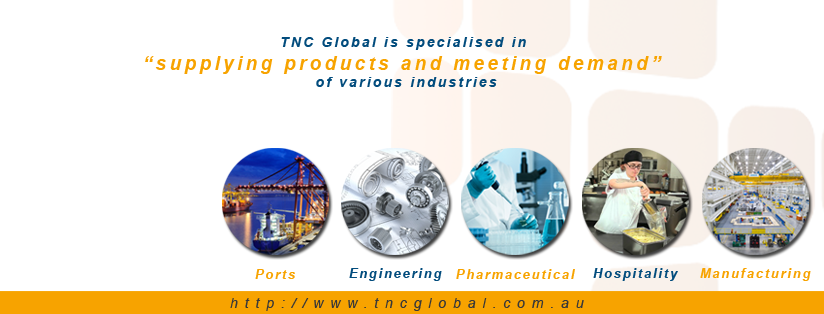
<style>
.page{position:relative;width:824px;height:314px;background:#ffffff}
.page>*{position:absolute;margin:0}
.t1{font:19.4px "Arial-BoldItalicMT";letter-spacing:0.16em;color:#f7a300}
.t2{font:13.9px "Arial-BoldItalicMT";letter-spacing:0.16em;color:#024c7d}
.t3{font:12.5px "Arial-BoldItalicMT";letter-spacing:0.16em;color:#f7a300}
.t4{font:12.5px "Arial-BoldItalicMT";letter-spacing:0.16em;color:#024c7d}
.t5{font:13.9px "Arial-ItalicMT";letter-spacing:0.5em;color:#383839}
</style>
<div class="page">
<p class="t1" style="left:145px;top:37px;width:517px;height:50px;text-align:center"><span class="t2">TNC Global is specialised in <br></span>“supplying products and meeting demand” <br><span class="t2">of various industries</span></p>
<p class="t3" style="left:255px;top:269px;width:40px;height:10px">Ports</p>
<p class="t4" style="left:349px;top:268px;width:93px;height:13px">Engineering</p>
<p class="t3" style="left:456px;top:269px;width:119px;height:10px">Pharmaceutical</p>
<p class="t4" style="left:593px;top:268px;width:85px;height:13px">Hospitality</p>
<p class="t3" style="left:700px;top:268px;width:111px;height:13px">Manufacturing</p>
<p class="t5" style="left:230px;top:298px;width:354px;height:13px">http://www.tncglobal.com.au</p>
</div>
